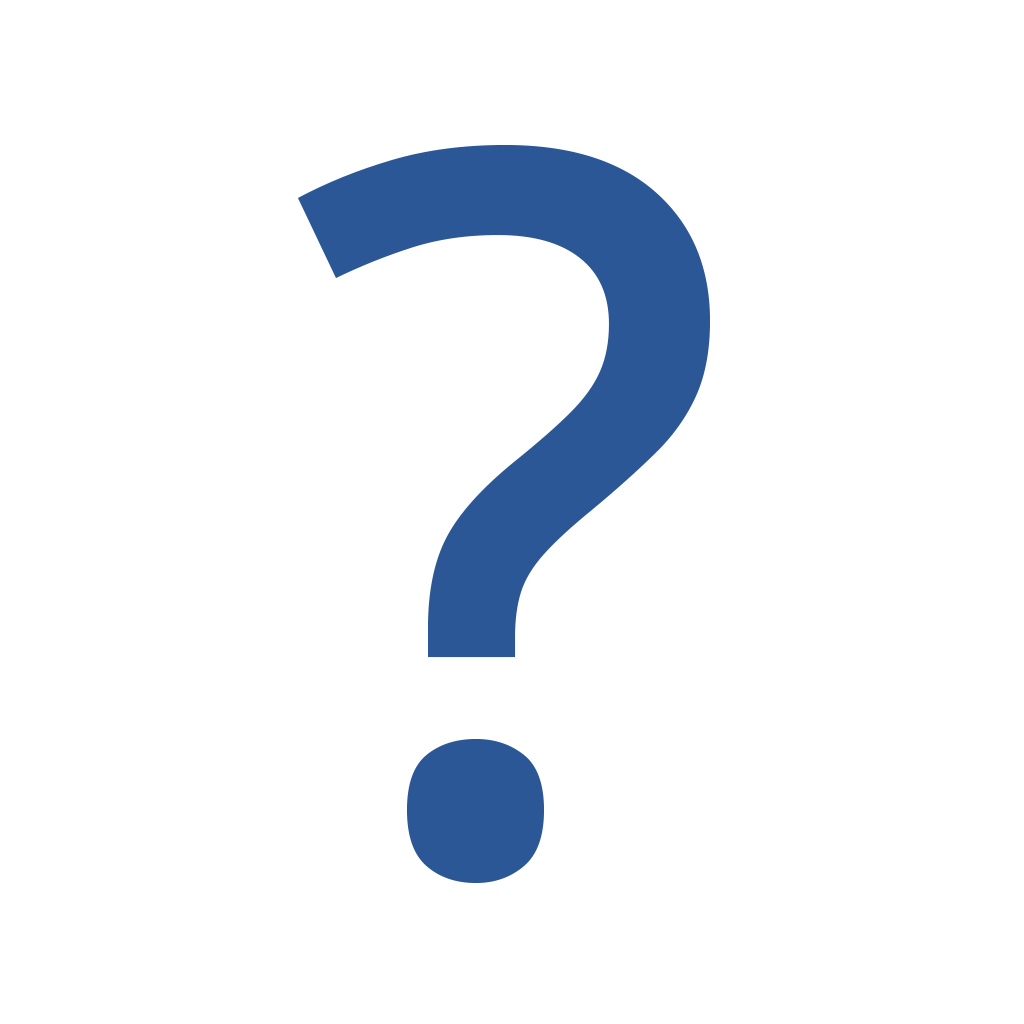
<style>
.page{position:relative;width:1024px;height:1024px;background:#ffffff}
.page>*{position:absolute;margin:0}
.t1{font:1000px "NotoSans-Medium";color:#2b5797}
</style>
<div class="page">
<p class="t1" style="left:298px;top:145px;width:412px;height:738px">?</p>
</div>
